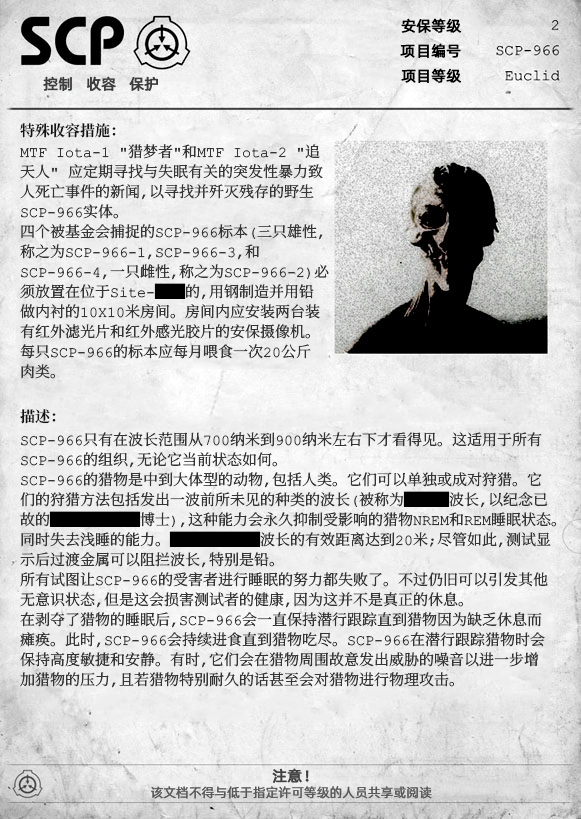
<style>
.page{position:relative;width:581px;height:819px}
.page>*{position:absolute;margin:0}
.t1{font:15px "AlibabaPuHuiTiR";color:#000000;font-weight:bold}
.t2{font:15px "AlibabaPuHuiTiR";color:#3d3d3d;font-weight:bold}
.t3{font:15px "ContainmentBreach-Bold";color:#121212}
.t4{font:15px/20px "ContainmentBreach-Regular";color:#353535}
.t5{font:15px/20px "ContainmentBreach-Regular";color:#000000}
.t6{font:15px "AlibabaPuHuiTiR";color:#414141;font-weight:bold}
.t7{font:13px "AlibabaPuHuiTiR";color:#575757}
</style>
<div class="page">
<p class="t1" style="left:401px;top:18px;width:61px;height:15px">安保等级</p>
<p class="t1" style="left:400px;top:43px;width:61px;height:15px">项目编号</p>
<p class="t2" style="left:43px;top:76px;width:115px;height:15px">控制   收容   保护</p>
<p class="t1" style="left:401px;top:68px;width:61px;height:15px">项目等级</p>
<p class="t3" style="left:20px;top:123px;width:96px;height:15px">特殊收容措施：</p>
<p class="t4" style="left:20px;top:144px;width:309px;height:235px">MTF Iota-1 "猎梦者"和MTF Iota-2 "追<br>天人" 应定期寻找与失眠有关的突发性暴力致<br>人死亡事件的新闻，以寻找并歼灭残存的野生<br>SCP-966实体。<br>四个被基金会捕捉的SCP-966标本（三只雄性，<br>称之为SCP-966-1，SCP-966-3，和<br>SCP-966-4，一只雌性，称之为SCP-966-2）必<br>须放置在位于Site-<span class="t5">██</span>的，用钢制造并用铅<br>做内衬的10X10米房间。房间内应安装两台装<br>有红外滤光片和红外感光胶片的安保摄像机。<br>每只SCP-966的标本应每月喂食一次20公斤<br>肉类。</p>
<p class="t3" style="left:20px;top:409px;width:36px;height:15px">描述：</p>
<p class="t4" style="left:20px;top:432px;width:536px;height:256px">SCP-966只有在波长范围从700纳米到900纳米左右下才看得见。这适用于所有<br>SCP-966的组织，无论它当前状态如何。<br>SCP-966的猎物是中到大体型的动物，包括人类。它们可以单独或成对狩猎。它<br>们的狩猎方法包括发出一波前所未见的种类的波长（被称为<span class="t5">███</span>波长，以纪念已<br>故的<span class="t5">██████</span>博士），这种能力会永久抑制受影响的猎物NREM和REM睡眠状态。<br>同时失去浅睡的能力。<span class="t5">██████</span>波长的有效距离达到20米；尽管如此，测试显<br>示后过渡金属可以阻拦波长，特别是铅。<br>所有试图让SCP-966的受害者进行睡眠的努力都失败了。不过仍旧可以引发其他<br>无意识状态，但是这会损害测试者的健康，因为这并不是真正的休息。<br>在剥夺了猎物的睡眠后，SCP-966会一直保持潜行跟踪直到猎物因为缺乏休息而<br>瘫痪。此时，SCP-966会持续进食直到猎物吃尽。SCP-966在潜行跟踪猎物时会<br>保持高度敏捷和安静。有时，它们会在猎物周围故意发出威胁的噪音以进一步增<br>加猎物的压力，且若猎物特别耐久的话甚至会对猎物进行物理攻击。</p>
<p class="t6" style="left:272px;top:768px;width:37px;height:15px">注意！</p>
<p class="t7" style="left:151px;top:786px;width:281px;height:13px">该文档不得与低于指定许可等级的人员共享或阅读</p>
</div>
